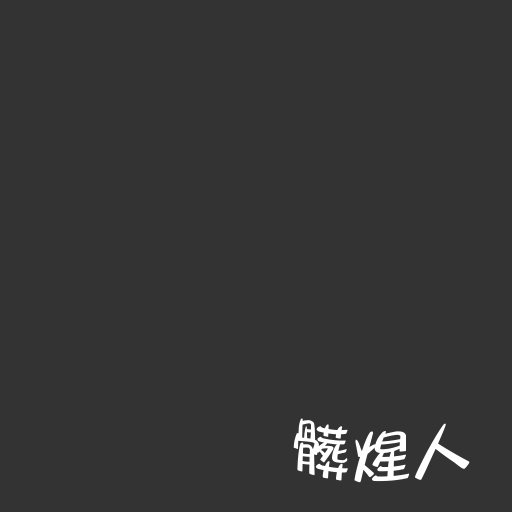
<style>
.page{position:relative;width:512px;height:512px;background:#333333}
.page>*{position:absolute;margin:0}
.t1{font:60px "DFPuDing-W7-WINP-BF";color:#ffffff}
</style>
<div class="page">
<p class="t1" style="left:293px;top:418px;width:177px;height:65px">髒煋人</p>
</div>
